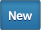
<style>
.page{position:relative;width:41px;height:30px}
.page>*{position:absolute;margin:0}
.t1{font:12px "Arial-BoldMT";letter-spacing:-0.035em;color:#ffffff}
</style>
<div class="page">
<p class="t1" style="left:9px;top:11px;width:24px;height:9px">New</p>
</div>
